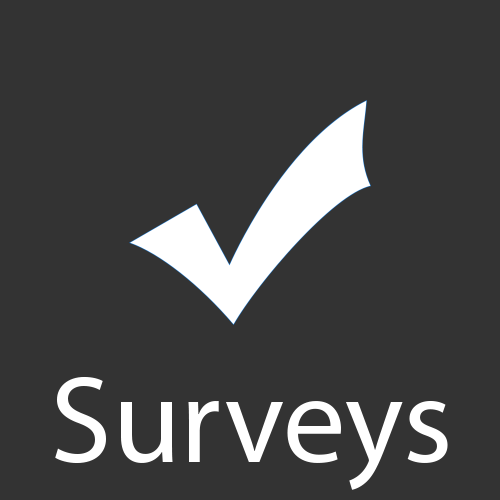
<style>
.page{position:relative;width:500px;height:500px;background:#333333}
.page>*{position:absolute;margin:0}
.t1{font:124.4px "MyriadPro-Regular";color:#ffffff}
</style>
<div class="page">
<p class="t1" style="left:55px;top:376px;width:393px;height:114px">Surveys</p>
</div>
